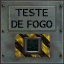
<style>
.page{position:relative;width:64px;height:64px}
.page>*{position:absolute;margin:0}
.t1{font:11px/11.7px "LucidaConsole";letter-spacing:-0.04em;color:#000000;font-weight:bold}
.t2{font:11px/11.7px "LucidaConsole";letter-spacing:-0.1em;color:#000000;font-weight:bold}
.t3{font:11px/11.7px "LucidaConsole";letter-spacing:-0.02em;color:#000000;font-weight:bold}
.t4{font:11px/11.7px "LucidaConsole";color:#000000;font-weight:bold}
</style>
<div class="page">
<p class="t1" style="left:11px;top:9px;width:42px;height:19px;text-align:center">TESTE<br><span class="t2">D</span>E FO<span class="t3">G</span><span class="t4">O</span></p>
</div>
